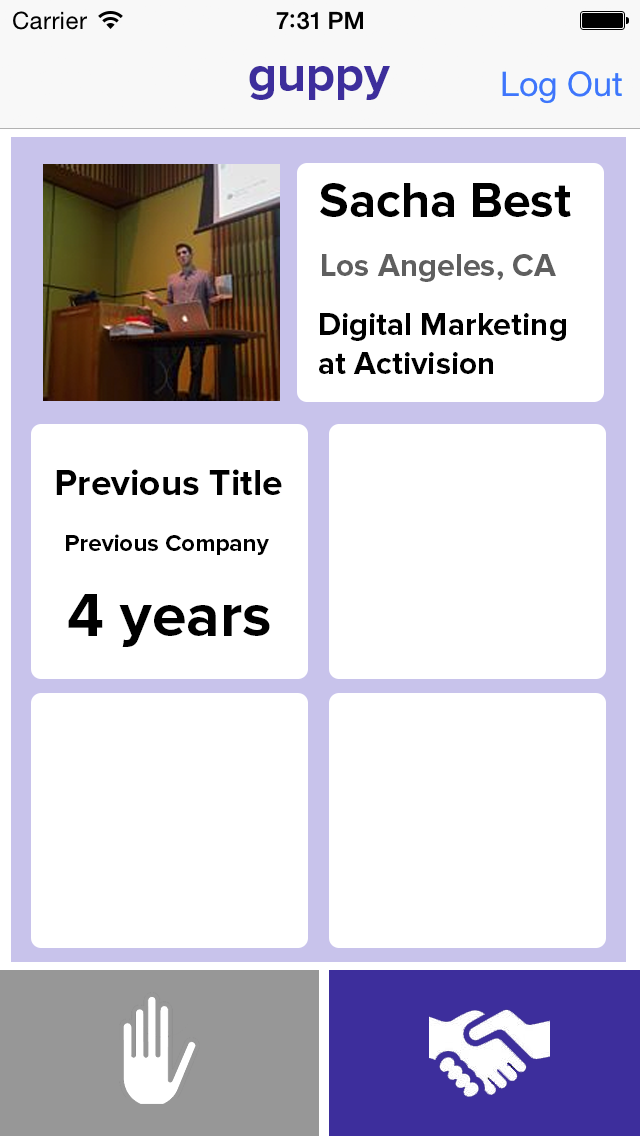
<style>
.page{position:relative;width:640px;height:1136px;background:#ffffff}
.page>*{position:absolute;margin:0}
.t1{font:50px "ProximaNova-Bold";color:#3d2e9c}
.t2{font:50px "ProximaNova-Bold";color:#000000}
.t3{font:32px "ProximaNova-Bold";color:#5f5f5f}
.t4{font:32px "ProximaNova-Bold";color:#000000}
.t5{font:37px "ProximaNova-Bold";color:#000000}
.t6{font:24px "ProximaNova-Bold";color:#000000}
.t7{font:62px "ProximaNova-Bold";color:#000000}
</style>
<div class="page">
<p class="t1" style="left:249px;top:66px;width:141px;height:34px">guppy</p>
<p class="t2" style="left:320px;top:183px;width:251px;height:34px">Sacha Best</p>
<p class="t3" style="left:322px;top:254px;width:234px;height:28px">Los Angeles, CA</p>
<p class="t4" style="left:319px;top:313px;width:247px;height:61px">Digital Marketing<br>at Activision</p>
<p class="t5" style="left:56px;top:469px;width:226px;height:26px">Previous Title</p>
<p class="t6" style="left:66px;top:534px;width:203px;height:21px">Previous Company</p>
<p class="t7" style="left:68px;top:594px;width:202px;height:53px">4 years</p>
</div>
